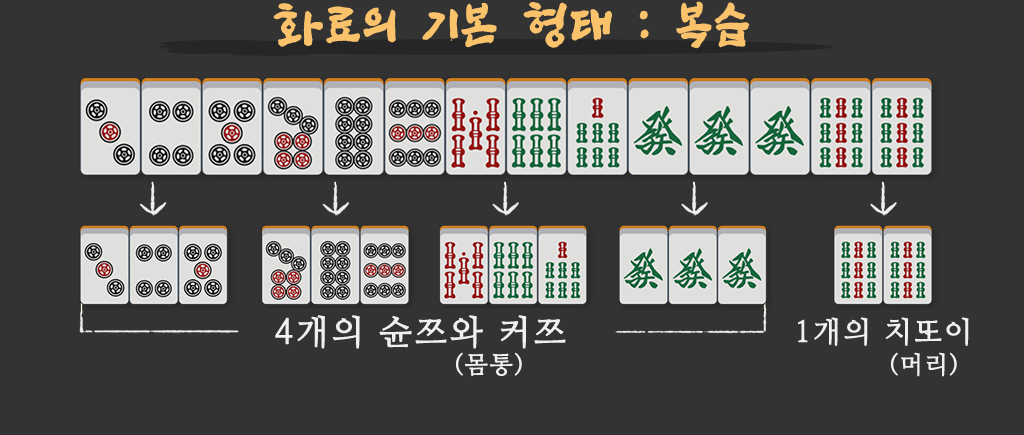
<style>
.page{position:relative;width:1024px;height:435px;background:#333333}
.page>*{position:absolute;margin:0}
.t1{font:48px "SangSangRockOTF";letter-spacing:0.06em;color:#fac26a;font-weight:bold}
.t2{font:34px "NanumMyeongjo";letter-spacing:0.06em;color:#f0f0ef;font-weight:bold}
.t3{font:29px "NanumMyeongjo";letter-spacing:0.06em;color:#f0f0ef;font-weight:bold}
.t4{font:24px "NanumMyeongjo";letter-spacing:0.06em;color:#f0f0ef;font-weight:bold}
</style>
<div class="page">
<p class="t1" style="left:273px;top:1px;width:477px;height:48px">화료의 기본 형태 : 복습</p>
<p class="t2" style="left:275px;top:315px;width:291px;height:34px">4개의 슌쯔와 커쯔</p>
<p class="t3" style="left:798px;top:317px;width:171px;height:29px">1개의 치또이</p>
<p class="t4" style="left:456px;top:352px;width:66px;height:25px">(몸통)</p>
<p class="t4" style="left:891px;top:352px;width:66px;height:25px">(머리)</p>
</div>
